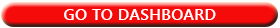
<style>
.page{position:relative;width:280px;height:28px;background:#f60b0b}
.page>*{position:absolute;margin:0}
.t1{font:16.4px "YuGothicUI-Bold";color:#ffffff}
</style>
<div class="page">
<p class="t1" style="left:64px;top:9px;width:152px;height:11px">GO TO DASHBOARD</p>
</div>
